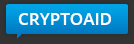
<style>
.page{position:relative;width:134px;height:44px}
.page>*{position:absolute;margin:0}
.t1{font:17px "OpenSans-Semibold";color:#ffffff}
</style>
<div class="page">
<p class="t1" style="left:18px;top:13px;width:93px;height:12px">CRYPTOAID</p>
</div>
